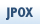
<style>
.page{position:relative;width:40px;height:24px}
.page>*{position:absolute;margin:0}
.t1{font:14px "Humanist521BT-BoldCondensed";color:#2d5078}
</style>
<div class="page">
<p class="t1" style="left:6px;top:7px;width:27px;height:13px">JPOX</p>
</div>
